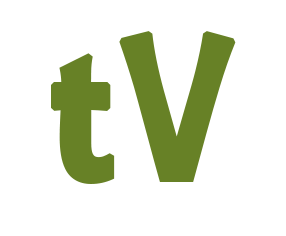
<style>
.page{position:relative;width:286px;height:236px;background:#ffffff}
.page>*{position:absolute;margin:0}
.t1{font:219px "ARESSENCE";letter-spacing:0.022em;color:#678126;font-weight:bold}
</style>
<div class="page">
<p class="t1" style="left:51px;top:31px;width:185px;height:153px">tV</p>
</div>
